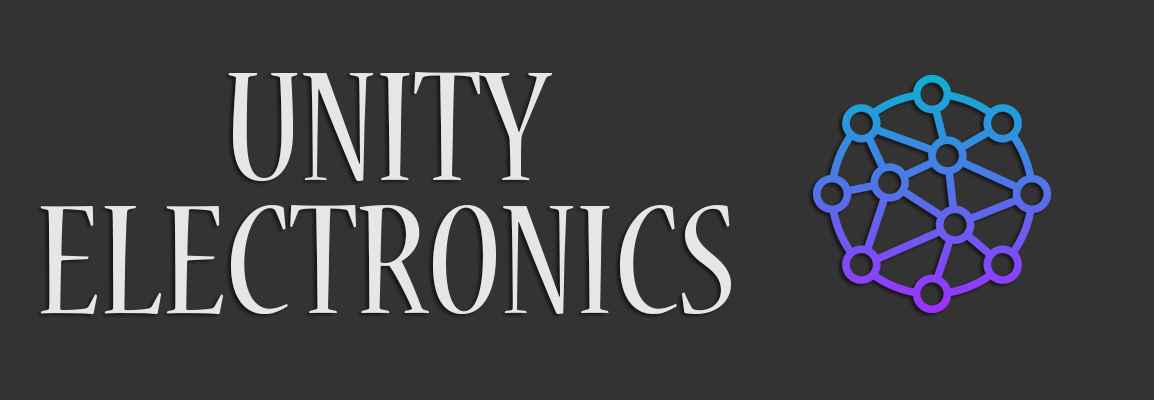
<style>
.page{position:relative;width:1154px;height:400px;background:#333333}
.page>*{position:absolute;margin:0}
.t1{font:173.3px/133.3px "NuevaStd-Cond";color:#e6e6e6}
</style>
<div class="page">
<p class="t1" style="left:40px;top:71px;width:691px;height:244px;text-align:center">UNITY<br>ELECTRONICS</p>
</div>
